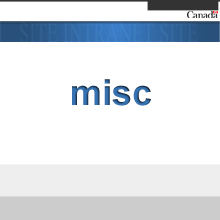
<style>
.page{position:relative;width:220px;height:220px;background:#ffffff}
.page>*{position:absolute;margin:0}
.t1{font:36px "Arial-BoldMT";color:#3773b2}
</style>
<div class="page">
<p class="t1" style="left:72px;top:79px;width:79px;height:27px">misc</p>
</div>
